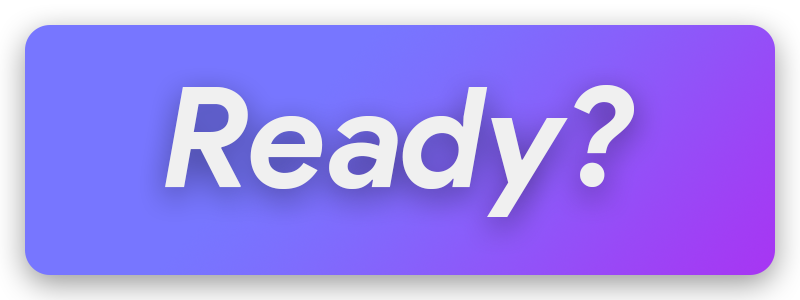
<style>
.page{position:relative;width:800px;height:300px}
.page>*{position:absolute;margin:0}
.t1{font:140px "ProductSans-BoldItalic";color:#f0f0f0}
</style>
<div class="page">
<p class="t1" style="left:165px;top:85px;width:469px;height:132px">Ready?</p>
</div>
